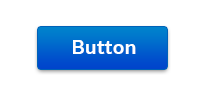
<style>
.page{position:relative;width:200px;height:100px;background:#ffffff}
.page>*{position:absolute;margin:0}
.t1{font:21.4px "SukhumvitSet-Bold";color:#ffffff}
</style>
<div class="page">
<p class="t1" style="left:73px;top:40px;width:63px;height:14px">Button</p>
</div>
